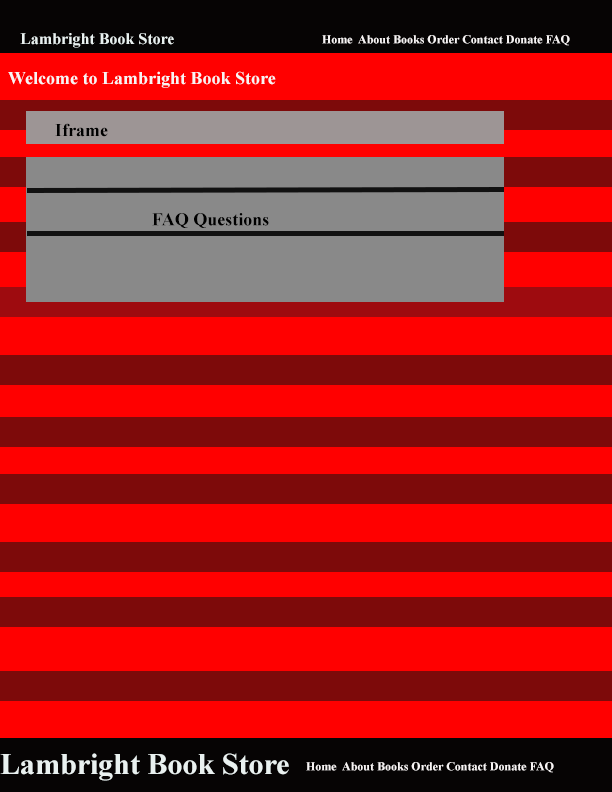
<style>
.page{position:relative;width:612px;height:792px;background:#ff0000}
.page>*{position:absolute;margin:0}
.t1{font:16px "TimesNewRomanPS-BoldMT";color:#e9f1f0}
.t2{font:12px "TimesNewRomanPS-BoldMT";color:#f7f4f4}
.t3{font:18px "TimesNewRomanPS-BoldMT";color:#f7f4f4}
.t4{font:18px "TimesNewRomanPS-BoldMT";color:#000000}
.t5{font:30px "TimesNewRomanPS-BoldMT";color:#e9f1f0}
</style>
<div class="page">
<p class="t1" style="left:20px;top:33px;width:154px;height:15px">Lambright Book Store</p>
<p class="t2" style="left:322px;top:35px;width:248px;height:11px">Home  About Books Order Contact Donate FAQ</p>
<p class="t3" style="left:8px;top:71px;width:268px;height:17px">Welcome to Lambright Book Store</p>
<p class="t4" style="left:55px;top:123px;width:53px;height:14px">Iframe</p>
<p class="t4" style="left:152px;top:213px;width:117px;height:15px">FAQ Questions</p>
<p class="t5" style="left:0px;top:753px;width:289px;height:28px">Lambright Book Store</p>
<p class="t2" style="left:306px;top:762px;width:248px;height:11px">Home  About Books Order Contact Donate FAQ</p>
</div>
